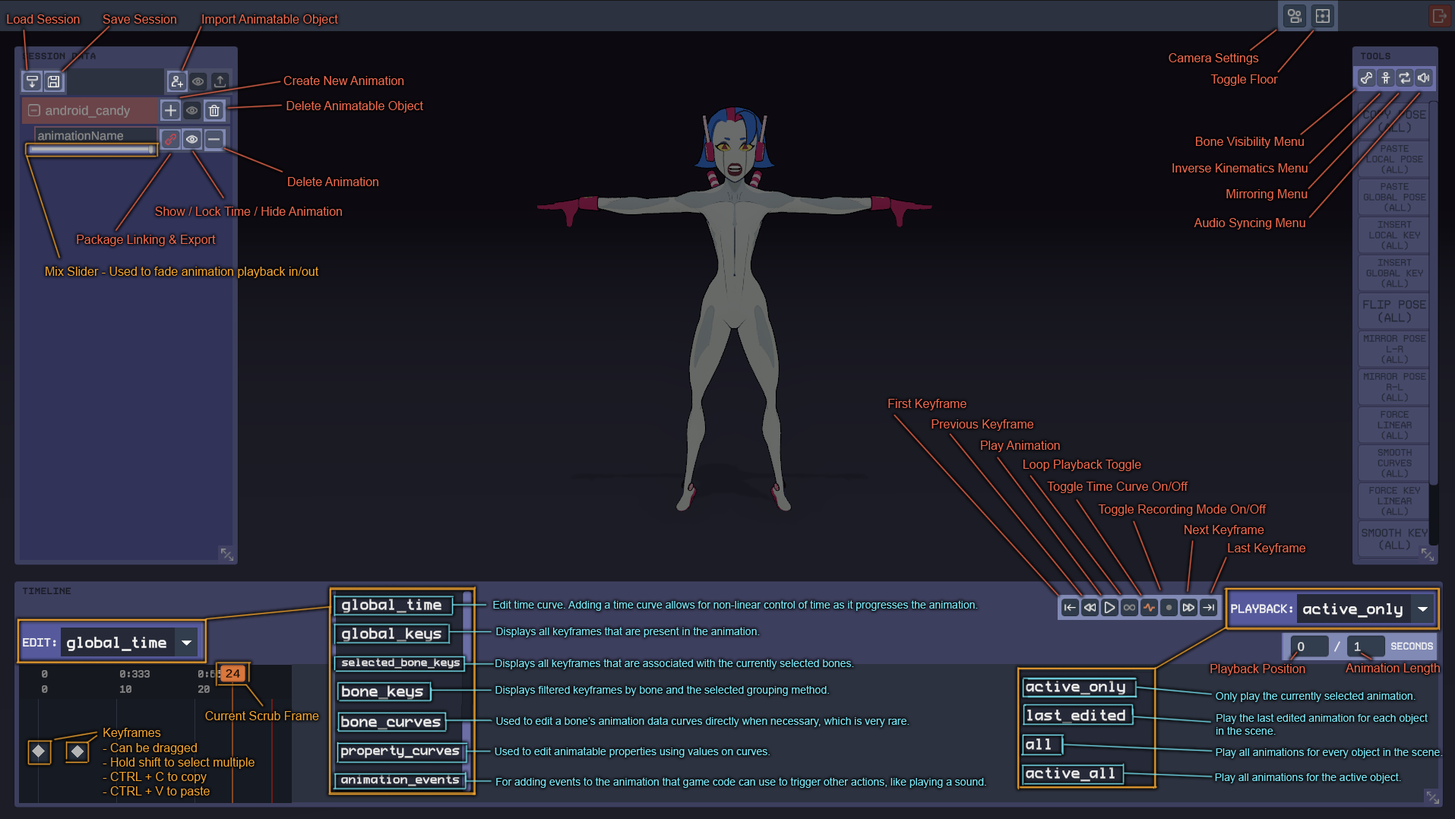
<style>
.page{position:relative;width:1455px;height:819px}
.page>*{position:absolute;margin:0}
.t1{font:12.2px "ArialMT";color:#e9684f}
.t2{font:12.2px "ArialMT";color:#eda232}
.t3{font:10.6px "ArialMT";color:#7ae2f3}
</style>
<div class="page">
<p class="t1" style="left:7px;top:14px;width:73px;height:10px">Load Session</p>
<p class="t1" style="left:103px;top:14px;width:73px;height:10px">Save Session</p>
<p class="t1" style="left:202px;top:14px;width:136px;height:12px">Import Animatable Object</p>
<p class="t1" style="left:1169px;top:53px;width:90px;height:12px">Camera Settings</p>
<p class="t1" style="left:283px;top:76px;width:121px;height:9px">Create New Animation</p>
<p class="t1" style="left:1211px;top:74px;width:67px;height:12px">Toggle Floor</p>
<p class="t1" style="left:287px;top:101px;width:136px;height:11px">Delete Animatable Object</p>
<p class="t1" style="left:1196px;top:137px;width:108px;height:11px">Bone Visibility Menu</p>
<p class="t1" style="left:1173px;top:163px;width:135px;height:10px">Inverse Kinematics Menu</p>
<p class="t1" style="left:288px;top:177px;width:90px;height:9px">Delete Animation</p>
<p class="t1" style="left:1227px;top:189px;width:81px;height:12px">Mirroring Menu</p>
<p class="t1" style="left:155px;top:207px;width:187px;height:9px">Show / Lock Time / Hide Animation</p>
<p class="t1" style="left:1194px;top:218px;width:112px;height:12px">Audio Syncing Menu</p>
<p class="t1" style="left:77px;top:235px;width:139px;height:11px">Package Linking &amp; Export</p>
<p class="t2" style="left:46px;top:267px;width:273px;height:11px">Mix Slider - Used to fade animation playback in/out</p>
<p class="t1" style="left:888px;top:399px;width:79px;height:11px">First Keyframe</p>
<p class="t1" style="left:932px;top:420px;width:102px;height:11px">Previous Keyframe</p>
<p class="t1" style="left:981px;top:441px;width:79px;height:11px">Play Animation</p>
<p class="t1" style="left:1024px;top:460px;width:118px;height:11px">Loop Playback Toggle</p>
<p class="t1" style="left:1047px;top:482px;width:142px;height:11px">Toggle Time Curve On/Off</p>
<p class="t1" style="left:1098px;top:505px;width:169px;height:11px">Toggle Recording Mode On/Off</p>
<p class="t1" style="left:1185px;top:525px;width:80px;height:12px">Next Keyframe</p>
<p class="t1" style="left:1228px;top:543px;width:78px;height:12px">Last Keyframe</p>
<p class="t3" style="left:493px;top:600px;width:485px;height:11px">Edit time curve. Adding a time curve allows for non-linear control of time as it progresses the animation.</p>
<p class="t3" style="left:496px;top:627px;width:264px;height:11px">Displays all keyframes that are present in the animation.</p>
<p class="t3" style="left:496px;top:659px;width:358px;height:11px">Displays all keyframes that are associated with the currently selected bones.</p>
<p class="t1" style="left:1211px;top:664px;width:95px;height:12px">Playback Position</p>
<p class="t1" style="left:1346px;top:663px;width:94px;height:12px">Animation Length</p>
<p class="t3" style="left:496px;top:686px;width:333px;height:10px">Displays filtered keyframes by bone and the selected grouping method.</p>
<p class="t3" style="left:1216px;top:692px;width:200px;height:10px">Only play the currently selected animation.</p>
<p class="t2" style="left:205px;top:711px;width:114px;height:9px">Current Scrub Frame</p>
<p class="t3" style="left:1217px;top:714px;width:211px;height:21px;text-align:right">Play the last edited animation for each object <br>in the scene.</p>
<p class="t3" style="left:496px;top:717px;width:414px;height:10px">Used to edit a bone’s animation data curves directly when necessary, which is very rare.</p>
<p class="t2" style="left:103px;top:728px;width:152px;height:70px;text-align:right">Keyframes<br>- Can be dragged<br>- Hold shift to select multiple<br>- CTRL + C to copy<br>- CTRL + V to paste</p>
<p class="t3" style="left:495px;top:747px;width:275px;height:11px">Used to edit animatable properties using values on curves.</p>
<p class="t3" style="left:1216px;top:748px;width:227px;height:10px">Play all animations for every object in the scene.</p>
<p class="t3" style="left:1215px;top:773px;width:186px;height:11px">Play all animations for the active object.</p>
<p class="t3" style="left:496px;top:777px;width:491px;height:11px">For adding events to the animation that game code can use to trigger other actions, like playing a sound.</p>
</div>
